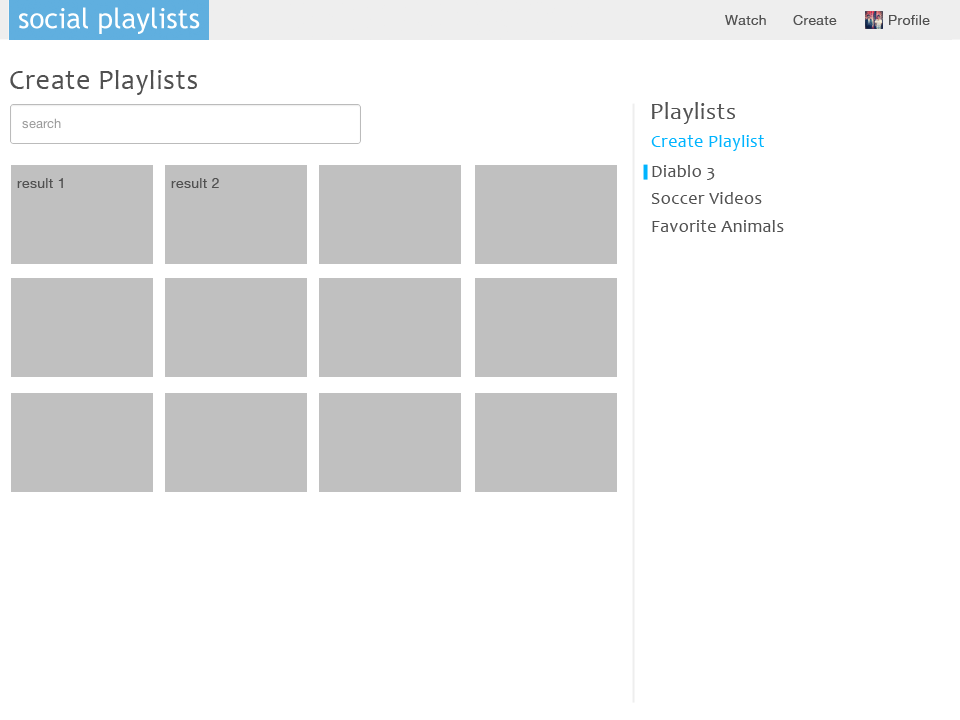
<style>
.page{position:relative;width:960px;height:720px;background:#ffffff}
.page>*{position:absolute;margin:0}
.t1{font:14px "HelveticaNeue";letter-spacing:0.025em;color:#515151}
.t2{font:28px "Candara";letter-spacing:0.025em;color:#515151}
.t3{font:24px "Candara";letter-spacing:0.025em;color:#515151}
.t4{font:18px "Candara";letter-spacing:0.025em;color:#00b4ff}
.t5{font:18px "Candara";letter-spacing:0.025em;color:#515151}
</style>
<div class="page">
<p class="t1" style="left:725px;top:15px;width:41px;height:10px">Watch</p>
<p class="t1" style="left:793px;top:15px;width:44px;height:10px">Create</p>
<p class="t1" style="left:889px;top:15px;width:41px;height:10px">Profile</p>
<p class="t2" style="left:10px;top:70px;width:187px;height:25px">Create Playlists</p>
<p class="t3" style="left:652px;top:102px;width:83px;height:22px">Playlists</p>
<p class="t4" style="left:651px;top:135px;width:113px;height:16px">Create Playlist</p>
<p class="t5" style="left:652px;top:165px;width:63px;height:15px">Diablo 3</p>
<p class="t1" style="left:17px;top:178px;width:46px;height:10px">result 1</p>
<p class="t1" style="left:171px;top:178px;width:48px;height:10px">result 2</p>
<p class="t5" style="left:651px;top:192px;width:111px;height:12px">Soccer Videos</p>
<p class="t5" style="left:652px;top:220px;width:132px;height:12px">Favorite Animals</p>
</div>
